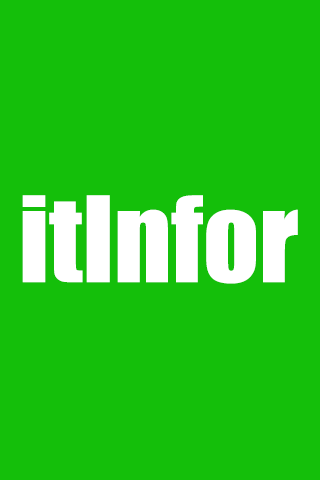
<style>
.page{position:relative;width:320px;height:480px;background:#14bf0a}
.page>*{position:absolute;margin:0}
.t1{font:109.7px "Impact";color:#ffffff}
</style>
<div class="page">
<p class="t1" style="left:22px;top:195px;width:276px;height:89px">itInfor</p>
</div>
